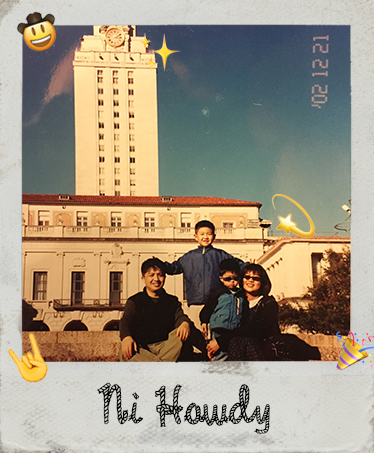
<style>
.page{position:relative;width:374px;height:453px}
.page>*{position:absolute;margin:0}
.t1{font:60px "RopeMF";color:#000000}
</style>
<div class="page">
<p class="t1" style="left:97px;top:382px;width:173px;height:52px">Ni Howdy</p>
</div>
